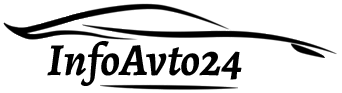
<style>
.page{position:relative;width:342px;height:93px;background:#ffffff}
.page>*{position:absolute;margin:0}
.t1{font:45.8px "Alegreya-BoldItalic";color:#000000}
</style>
<div class="page">
<p class="t1" style="left:47px;top:41px;width:195px;height:45px">InfoAvto24</p>
</div>
